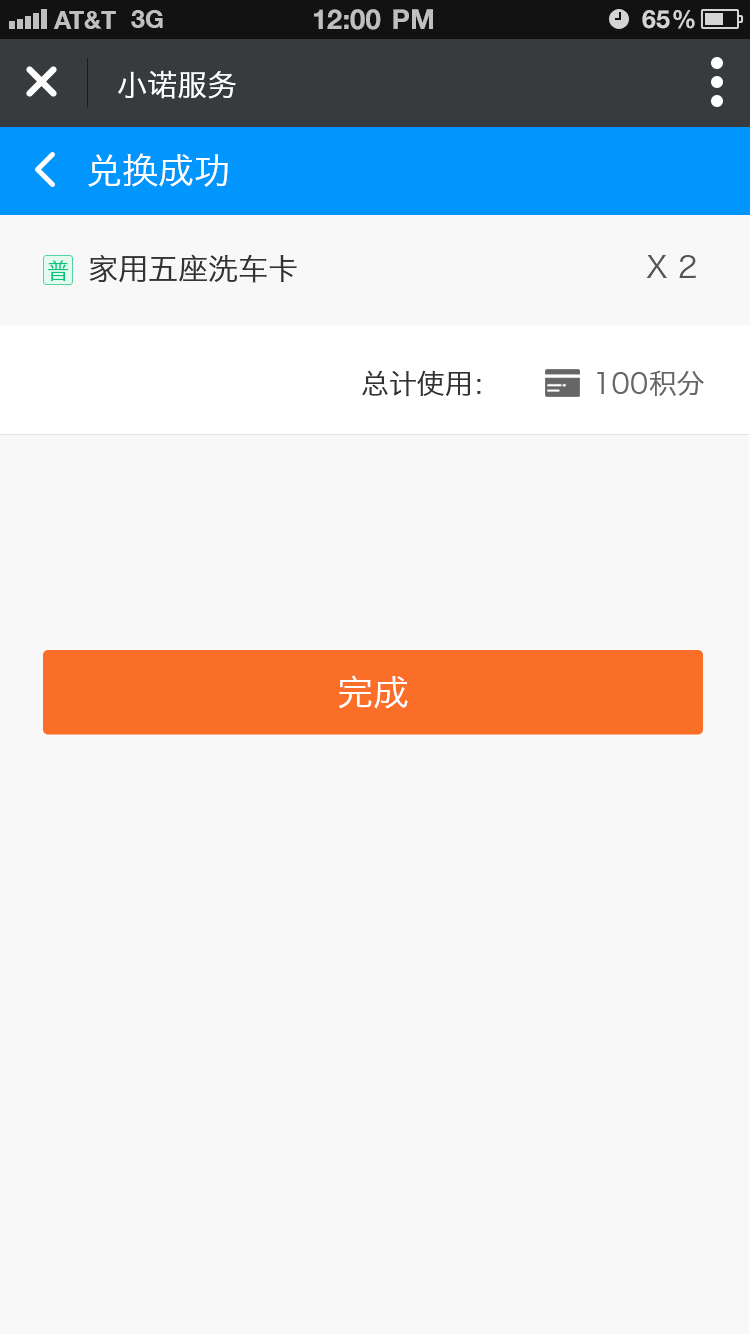
<style>
.page{position:relative;width:750px;height:1334px;background:#f8f8f8}
.page>*{position:absolute;margin:0}
.t1{font:30px "HiraginoSansGB-W3";color:#ffffff}
.t2{font:36px "HiraginoSansGB-W3";color:#ffffff}
.t3{font:30px "HiraginoSansGB-W3";color:#333333}
.t4{font:30px "HiraginoSansGB-W3";color:#555555}
.t5{font:22px "HiraginoSansGB-W3";color:#07c279}
.t6{font:28px "HiraginoSansGB-W3";color:#333333}
.t7{font:28px "HiraginoSansGB-W3";color:#666666}
</style>
<div class="page">
<p class="t1" style="left:118px;top:70px;width:118px;height:29px">小诺服务</p>
<p class="t2" style="left:88px;top:153px;width:140px;height:34px">兑换成功</p>
<p class="t3" style="left:89px;top:254px;width:208px;height:29px">家用五座洗车卡</p>
<p class="t4" style="left:646px;top:255px;width:50px;height:24px">X 2</p>
<p class="t5" style="left:48px;top:260px;width:20px;height:21px">普</p>
<p class="t6" style="left:362px;top:370px;width:119px;height:27px">总计使用：</p>
<p class="t7" style="left:597px;top:370px;width:107px;height:27px">100积分</p>
<p class="t2" style="left:339px;top:675px;width:69px;height:34px">完成</p>
</div>
